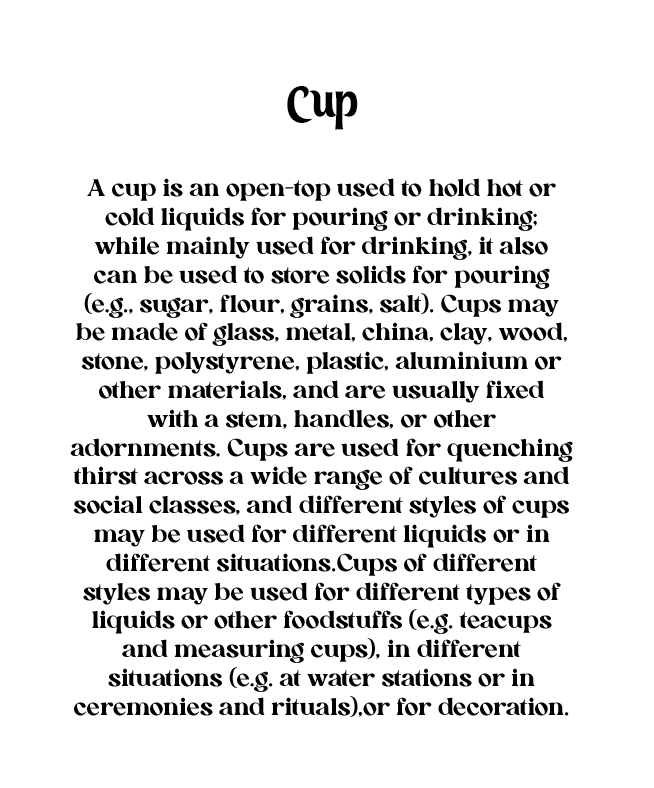
<style>
.page{position:relative;width:654px;height:788px;background:#ffffff}
.page>*{position:absolute;margin:0}
.t1{font:48px "KZ_Tangak-Regular";color:#000000}
.t2{font:24px "AllenoireFreePersonal-Regular";color:#000000}
</style>
<div class="page">
<p class="t1" style="left:287px;top:86px;width:71px;height:44px">Cup</p>
<p class="t2" style="left:70px;top:178px;width:503px;height:539px;text-align:center">A cup is an open-top used to hold hot or cold liquids for pouring or drinking; while mainly used for drinking, it also can be used to store solids for pouring (e.g., sugar, flour, grains, salt). Cups may be made of glass, metal, china, clay, wood, stone, polystyrene, plastic, aluminium or other materials, and are usually fixed with a stem, handles, or other adornments. Cups are used for quenching thirst across a wide range of cultures and social classes, and different styles of cups may be used for different liquids or in different situations.Cups of different styles may be used for different types of liquids or other foodstuffs (e.g. teacups and measuring cups), in different situations (e.g. at water stations or in ceremonies and rituals),or for decoration.</p>
</div>
